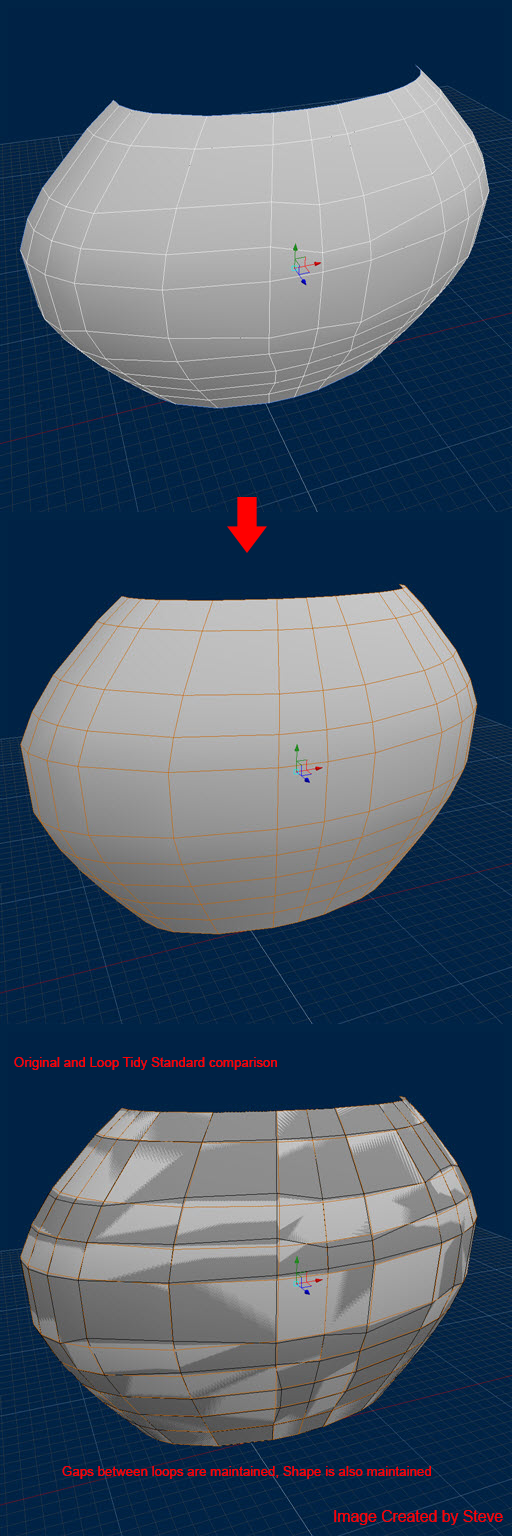
<style>
.page{position:relative;width:512px;height:1536px}
.page>*{position:absolute;margin:0}
.t1{font:13.3px "ArialMT";color:#ff0000}
.t2{font:15.8px "ArialMT";color:#ff0000}
</style>
<div class="page">
<p class="t1" style="left:14px;top:1057px;width:263px;height:13px">Original and Loop Tidy Standard comparison</p>
<p class="t1" style="left:62px;top:1466px;width:369px;height:13px">Gaps between loops are maintained, Shape is also maintained</p>
<p class="t2" style="left:334px;top:1510px;width:169px;height:15px">Image Created by Steve</p>
</div>
